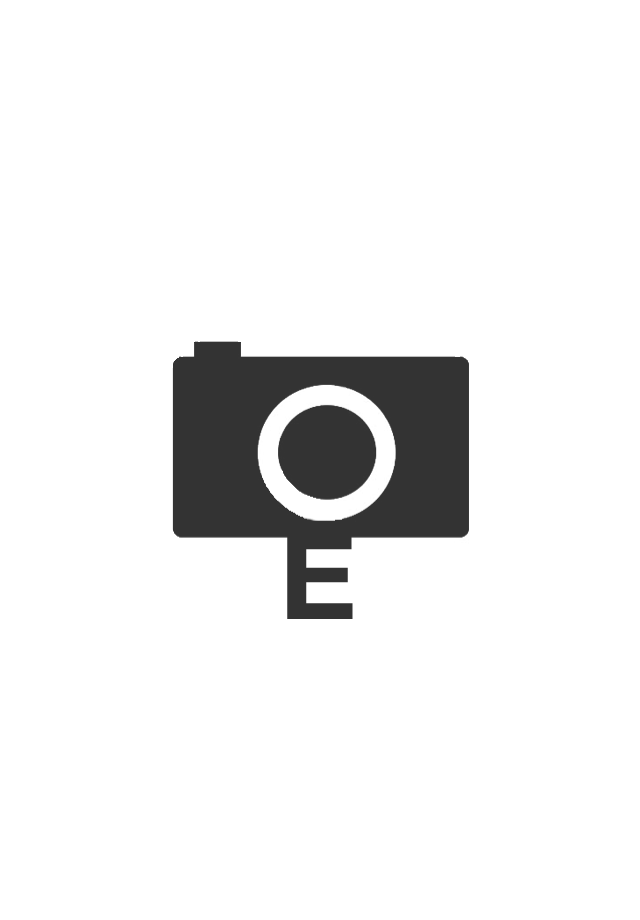
<style>
.page{position:relative;width:640px;height:920px;background:#ffffff}
.page>*{position:absolute;margin:0}
.t1{font:119.8px "HelveticaNeue-Bold";color:#333333}
</style>
<div class="page">
<p class="t1" style="left:287px;top:533px;width:66px;height:86px">E</p>
</div>
